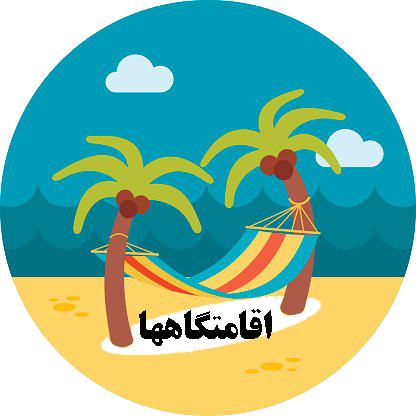
<style>
.page{position:relative;width:416px;height:416px;background:#ffffff}
.page>*{position:absolute;margin:0}
.t1{font:39px "2-TitrBold";color:#000000}
</style>
<div class="page">
<p class="t1" style="left:139px;top:309px;width:133px;height:37px">اقامتگاهها</p>
</div>
